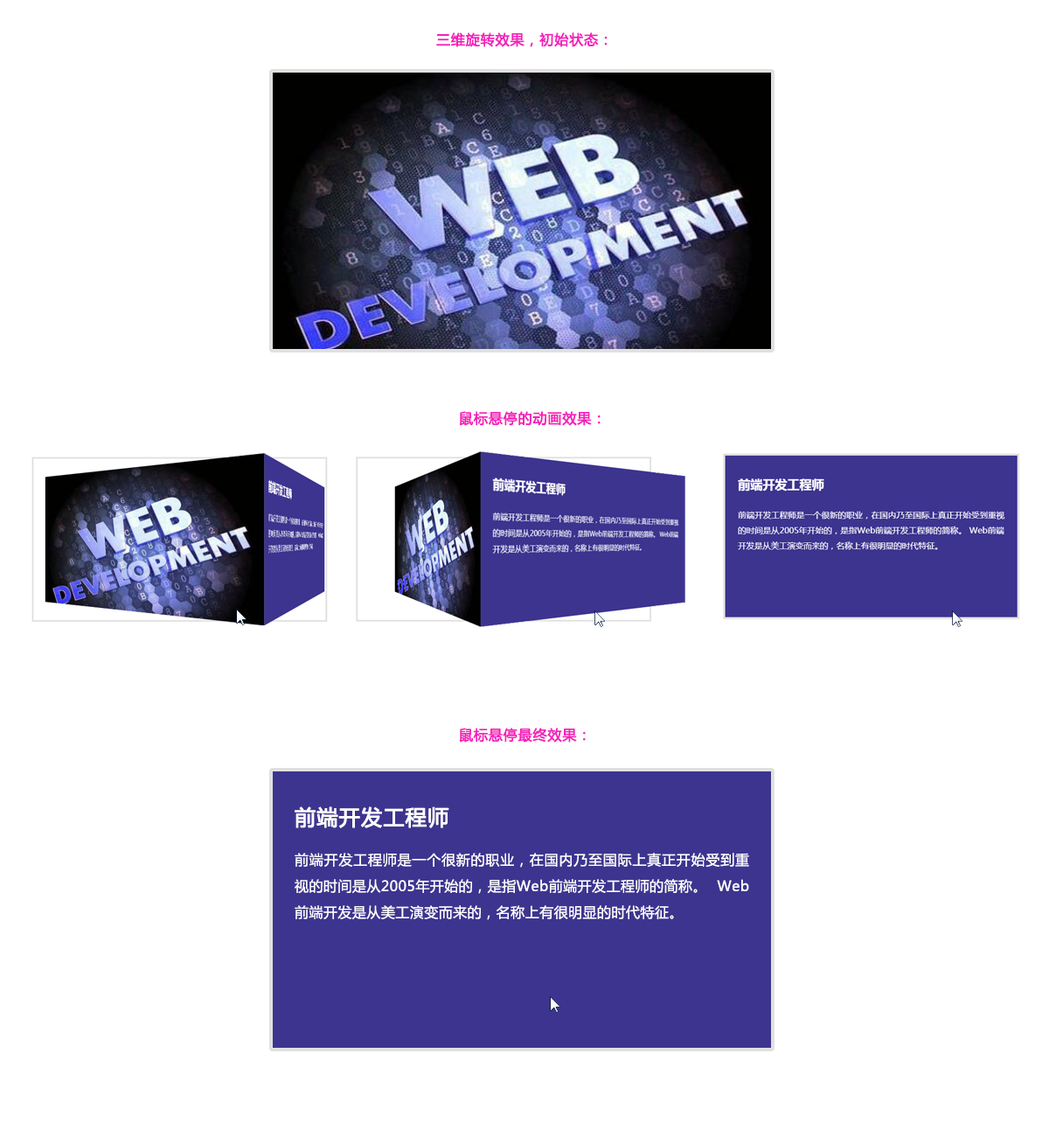
<style>
.page{position:relative;width:1049px;height:1137px;background:#ffffff}
.page>*{position:absolute;margin:0}
.t1{font:14px "MicrosoftYaHei";letter-spacing:0.03em;color:#f520bb;font-weight:bold}
.t2{font:21px "MicrosoftYaHei";letter-spacing:0.03em;color:#ffffff;font-weight:bold}
.t3{font:14px/26.2px "MicrosoftYaHei";letter-spacing:0.03em;color:#ffffff}
</style>
<div class="page">
<p class="t1" style="left:436px;top:32px;width:172px;height:15px">三维旋转效果，初始状态：</p>
<p class="t1" style="left:459px;top:411px;width:142px;height:15px">鼠标悬停的动画效果：</p>
<p class="t1" style="left:459px;top:727px;width:127px;height:15px">鼠标悬停最终效果：</p>
<p class="t2" style="left:295px;top:806px;width:154px;height:22px">前端开发工程师</p>
<p class="t3" style="left:295px;top:852px;width:454px;height:68px;text-align:justify">前端开发工程师是一个很新的职业，在国内乃至国际上真正开始受到重视的时间是从2005年开始的，是指Web前端开发工程师的简称。 Web前端开发是从美工演变而来的，名称上有很明显的时代特征。</p>
</div>
